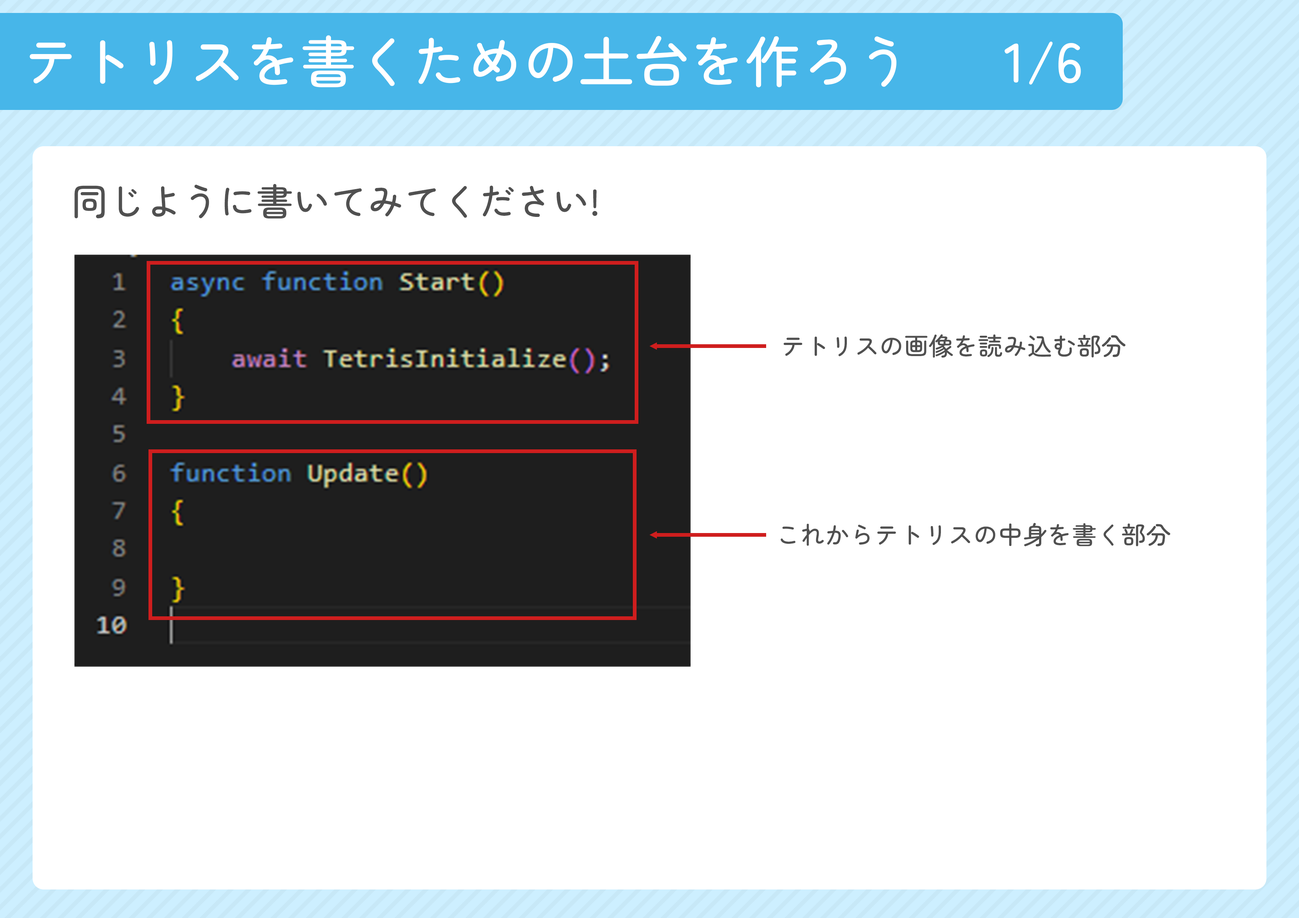
<style>
.page{position:relative;width:1299px;height:918px;background:#ffffff}
.page>*{position:absolute;margin:0}
.t1{font:55.5px "ZenMaruGothic-Medium";color:#ffffff}
.t2{font:37px "ZenMaruGothic-Medium";color:#505050}
.t3{font:24.7px "ZenMaruGothic-Medium";color:#505050}
</style>
<div class="page">
<p class="t1" style="left:30px;top:35px;width:866px;height:52px">テトリスを書くための土台を作ろう</p>
<p class="t1" style="left:1004px;top:41px;width:77px;height:44px">1/6</p>
<p class="t2" style="left:74px;top:184px;width:523px;height:35px">同じように書いてみてください!</p>
<p class="t3" style="left:783px;top:334px;width:342px;height:24px">テトリスの画像を読み込む部分</p>
<p class="t3" style="left:780px;top:523px;width:390px;height:24px">これからテトリスの中身を書く部分</p>
</div>
